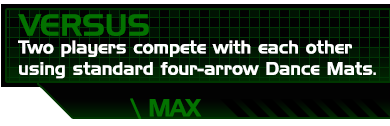
<style>
.page{position:relative;width:390px;height:126px;background:#020202}
.page>*{position:absolute;margin:0}
.t1{font:29.6px "HandelGothicBT-Regular";color:#037200}
.t2{font:17.8px "HandelGothicBT-Regular";color:#ffffff}
.t3{font:23.7px "HandelGothicBT-Regular";letter-spacing:-0.05em;color:#037200}
.t4{font:23.7px "HandelGothicBT-Regular";letter-spacing:-0.05em;color:#037200;font-weight:bold}
</style>
<div class="page">
<p class="t1" style="left:18px;top:14px;width:131px;height:22px">VERSUS</p>
<p class="t2" style="left:18px;top:40px;width:358px;height:39px">Two players compete with each other<br>using standard four-arrow Dance Mats.</p>
<p class="t3" style="left:130px;top:98px;width:72px;height:21px"><span class="t4">\</span> MAX</p>
</div>
